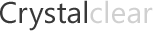
<style>
.page{position:relative;width:153px;height:31px;background:#ffffff}
.page>*{position:absolute;margin:0}
.t1{font:30px "SegoeUI";color:#383838}
.t2{font:30px "SegoeUI";color:#d0d0d0}
</style>
<div class="page">
<p class="t1" style="left:0px;top:0px;width:153px;height:31px">Crystal<span class="t2">clear</span></p>
</div>
